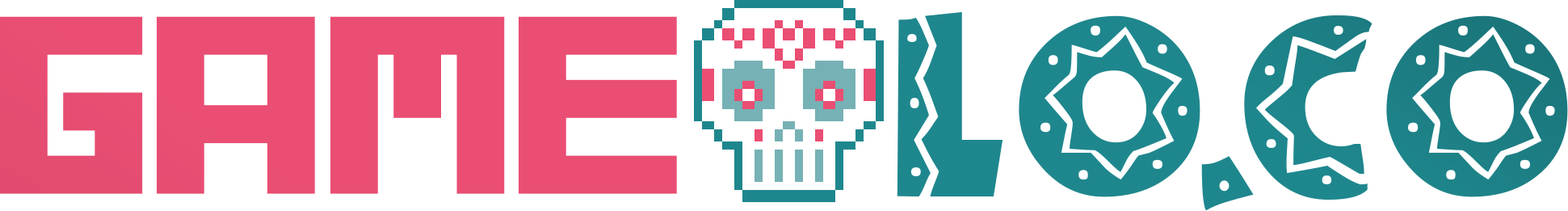
<style>
.page{position:relative;width:1568px;height:211px;background:#ffffff}
.page>*{position:absolute;margin:0}
.t1{font:202px "Rust";color:#ea4e73;scale:1.25 1}
.t2{font:302.9px "El-RioLobo";color:#1e878d}
.t3{font:302.9px "El-RioLobo";letter-spacing:-0.06em;color:#1e878d}
.t4{font:302.9px "El-RioLobo";letter-spacing:-0.1em;color:#1e878d}
</style>
<div class="page">
<p class="t1" style="left:0px;top:16px;width:677px;height:178px">game</p>
<p class="t2" style="left:897px;top:12px;width:671px;height:199px">L<span class="t3">O</span><span class="t4">.</span>CO</p>
</div>
